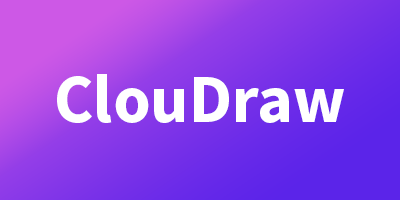
<style>
.page{position:relative;width:400px;height:200px}
.page>*{position:absolute;margin:0}
.t1{font:68px "SourceSansPro-Bold";color:#ffffff}
</style>
<div class="page">
<p class="t1" style="left:57px;top:74px;width:287px;height:49px">ClouDraw</p>
</div>
